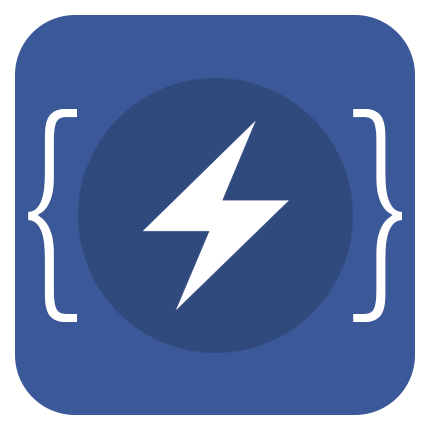
<style>
.page{position:relative;width:430px;height:430px;background:#3b5998}
.page>*{position:absolute;margin:0}
.t1{font:232px "HelveticaNeue-Thin";color:#ffffff}
</style>
<div class="page">
<p class="t1" style="left:28px;top:109px;width:374px;height:213px">{    }</p>
</div>
